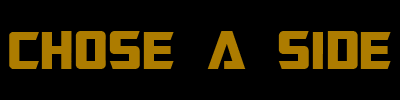
<style>
.page{position:relative;width:400px;height:100px;background:#000000}
.page>*{position:absolute;margin:0}
.t1{font:60px "TransformersMovie";letter-spacing:0.04em;color:#ad7c00}
.t2{font:60px "TransformersMovie";letter-spacing:0.02em;color:#ad7c00}
</style>
<div class="page">
<p class="t1" style="left:9px;top:31px;width:382px;height:38px"><span class="t2">C</span>hose a side</p>
</div>
